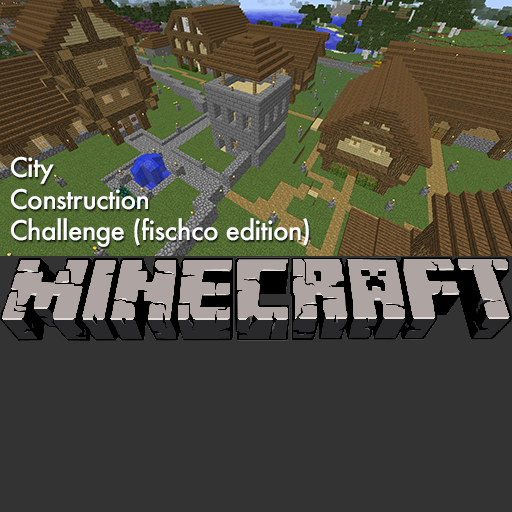
<style>
.page{position:relative;width:512px;height:512px;background:#333333}
.page>*{position:absolute;margin:0}
.t1{font:26.3px "Futura-Medium";letter-spacing:-0.025em;color:#ffffff}
</style>
<div class="page">
<p class="t1" style="left:11px;top:156px;width:298px;height:91px">City<br>Construction<br>Challenge (fischco edition)</p>
</div>
